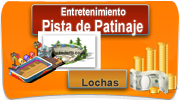
<style>
.page{position:relative;width:180px;height:100px}
.page>*{position:absolute;margin:0}
.t1{font:16.7px/16.7px "Arial-BoldMT";color:#ffffff;scale:0.77 1}
.t2{font:13.9px/16.7px "Arial-BoldMT";color:#ffffff;scale:0.77 1}
.t3{font:11.1px/16.7px "Arial-BoldMT";color:#ffffff;scale:0.77 1}
.t4{font:10.4px "Arial-BoldMT";color:#303030;scale:1.03 1}
.t5{font:20.8px "Arial-BoldMT";color:#303030;scale:1.03 1}
</style>
<div class="page">
<p class="t1" style="left:42px;top:7px;width:101px;height:29px"><span class="t2">          </span><span class="t3">Entretenimiento<br></span>   Pista de Patinaje</p>
<p class="t4" style="left:82px;top:78px;width:37px;height:9px"><span class="t5"><br></span>Lochas</p>
</div>
